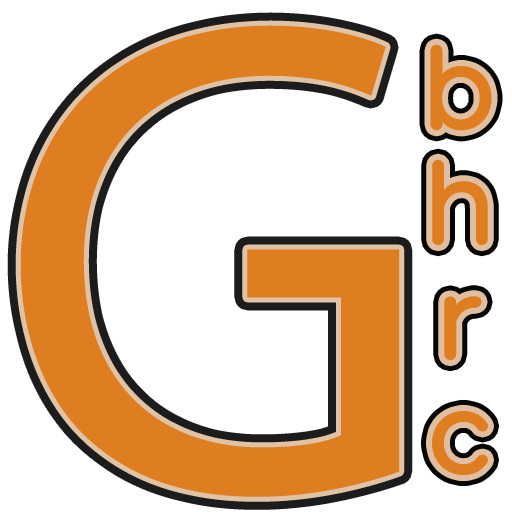
<style>
.page{position:relative;width:512px;height:512px;background:#ffffff}
.page>*{position:absolute;margin:0}
.t1{font:684.6px "MyriadPro-Regular";color:#de7e20}
.t2{font:112.8px/115px "VisbyRoundCF-Regular";color:#de7e20}
</style>
<div class="page">
<p class="t1" style="left:20px;top:25px;width:380px;height:472px">G</p>
<p class="t2" style="left:432px;top:46px;width:58px;height:427px;text-align:center">b<br>h<br>r<br>c</p>
</div>
